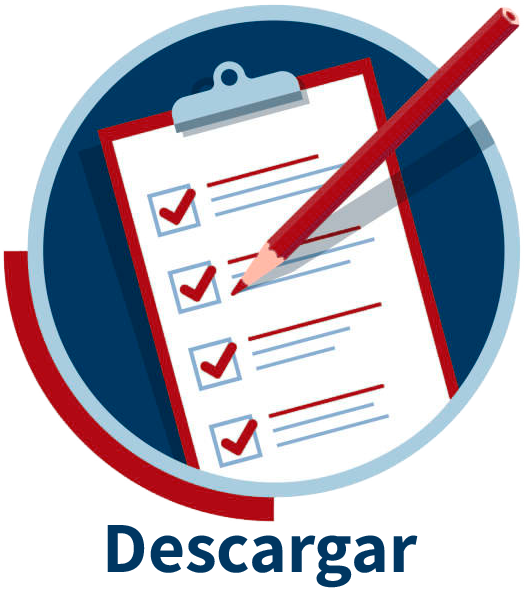
<style>
.page{position:relative;width:525px;height:607px;background:#ffffff}
.page>*{position:absolute;margin:0}
.t1{font:72px "SourceSansRoman_676wght";color:#003762}
</style>
<div class="page">
<p class="t1" style="left:107px;top:525px;width:311px;height:63px">Descargar</p>
</div>
